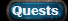
<style>
.page{position:relative;width:68px;height:21px}
.page>*{position:absolute;margin:0}
.t1{font:13.9px "BritannicBold";color:#ffffff;scale:1.12 1}
</style>
<div class="page">
<p class="t1" style="left:12px;top:6px;width:47px;height:11px;opacity:0.65">Quests</p>
</div>
